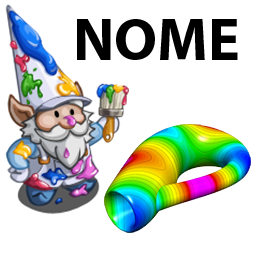
<style>
.page{position:relative;width:256px;height:256px;background:#ffffff}
.page>*{position:absolute;margin:0}
.t1{font:60px "MyriadPro-Bold";color:#000000}
</style>
<div class="page">
<p class="t1" style="left:77px;top:19px;width:161px;height:41px">NOME</p>
</div>
